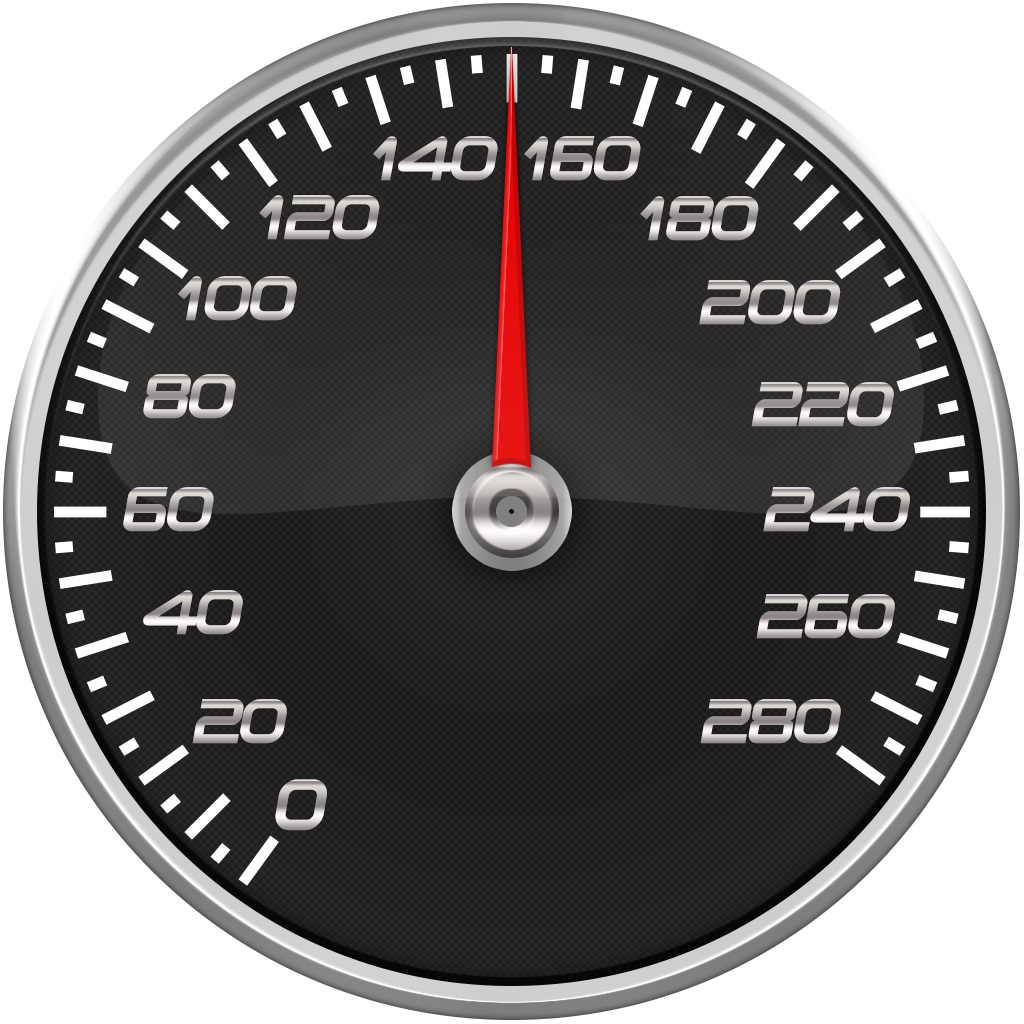
<style>
.page{position:relative;width:1024px;height:1024px;background:#ffffff}
.page>*{position:absolute;margin:0}
.t1{font:60.2px "Planetium-XBoldDemo";letter-spacing:-0.08em;font-style:italic}
.t2{font:60.2px "Planetium-XBoldDemo";letter-spacing:-0.1em;font-style:italic}
.t3{font:69.6px "Planetium-XBoldDemo";letter-spacing:-0.16em;font-style:italic;scale:0.96 1}
</style>
<div class="page">
<p class="t1" style="left:373px;top:136px;width:125px;height:45px">140</p>
<p class="t1" style="left:524px;top:136px;width:117px;height:45px">160</p>
<p class="t1" style="left:259px;top:195px;width:121px;height:45px">120</p>
<p class="t1" style="left:640px;top:196px;width:119px;height:45px">180</p>
<p class="t1" style="left:178px;top:276px;width:119px;height:45px">100</p>
<p class="t1" style="left:699px;top:280px;width:142px;height:45px">200</p>
<p class="t1" style="left:143px;top:374px;width:93px;height:45px">80</p>
<p class="t1" style="left:751px;top:382px;width:143px;height:45px">220</p>
<p class="t1" style="left:123px;top:487px;width:91px;height:45px">60</p>
<p class="t1" style="left:763px;top:487px;width:147px;height:45px">240</p>
<p class="t1" style="left:143px;top:590px;width:100px;height:45px">40</p>
<p class="t1" style="left:756px;top:594px;width:139px;height:45px">260</p>
<p class="t2" style="left:192px;top:699px;width:95px;height:45px">20</p>
<p class="t1" style="left:700px;top:699px;width:141px;height:45px">280</p>
<p class="t3" style="left:275px;top:779px;width:52px;height:52px">0</p>
</div>
